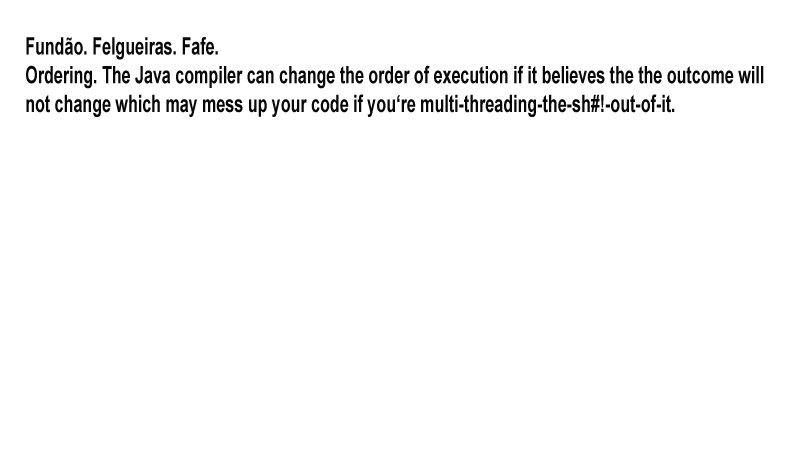
<style>
.page{position:relative;width:800px;height:450px;background:#ffffff}
.page>*{position:absolute;margin:0}
.t1{font:24px "Arial-BoldMT";color:#080808;scale:0.67 1}
</style>
<div class="page">
<p class="t1" style="left:26px;top:37px;width:738px;height:80px">Fundão. Felgueiras. Fafe. <br>Ordering. The Java compiler can change the order of execution if it believes the the outcome will not change which may mess up your code if you‘re multi-threading-the-sh#!-out-of-it.</p>
</div>
